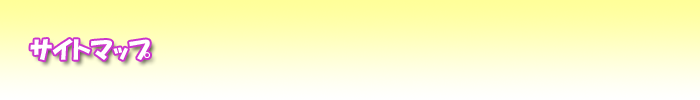
<style>
.page{position:relative;width:700px;height:100px}
.page>*{position:absolute;margin:0}
.t1{font:24px "HGPSoeiKakupoptai";color:#ffffff}
</style>
<div class="page">
<p class="t1" style="left:30px;top:39px;width:120px;height:22px">サイトマップ</p>
</div>
